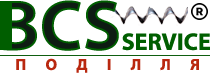
<style>
.page{position:relative;width:210px;height:79px;background:#ffffff}
.page>*{position:absolute;margin:0}
.t1{font:72px "MyriadPro-Bold";text-transform:uppercase}
.t2{font:24px "MyriadPro-Bold";color:#005e00;text-transform:uppercase}
.t3{font:16px "MyriadPro-Bold";color:#b92810;text-transform:uppercase}
</style>
<div class="page">
<p class="t1" style="left:0px;top:0px;width:119px;height:51px">Bcs</p>
<p class="t2" style="left:122px;top:33px;width:88px;height:18px">service</p>
<p class="t3" style="left:16px;top:58px;width:183px;height:15px">П      о      д      і      л      л      я</p>
</div>
